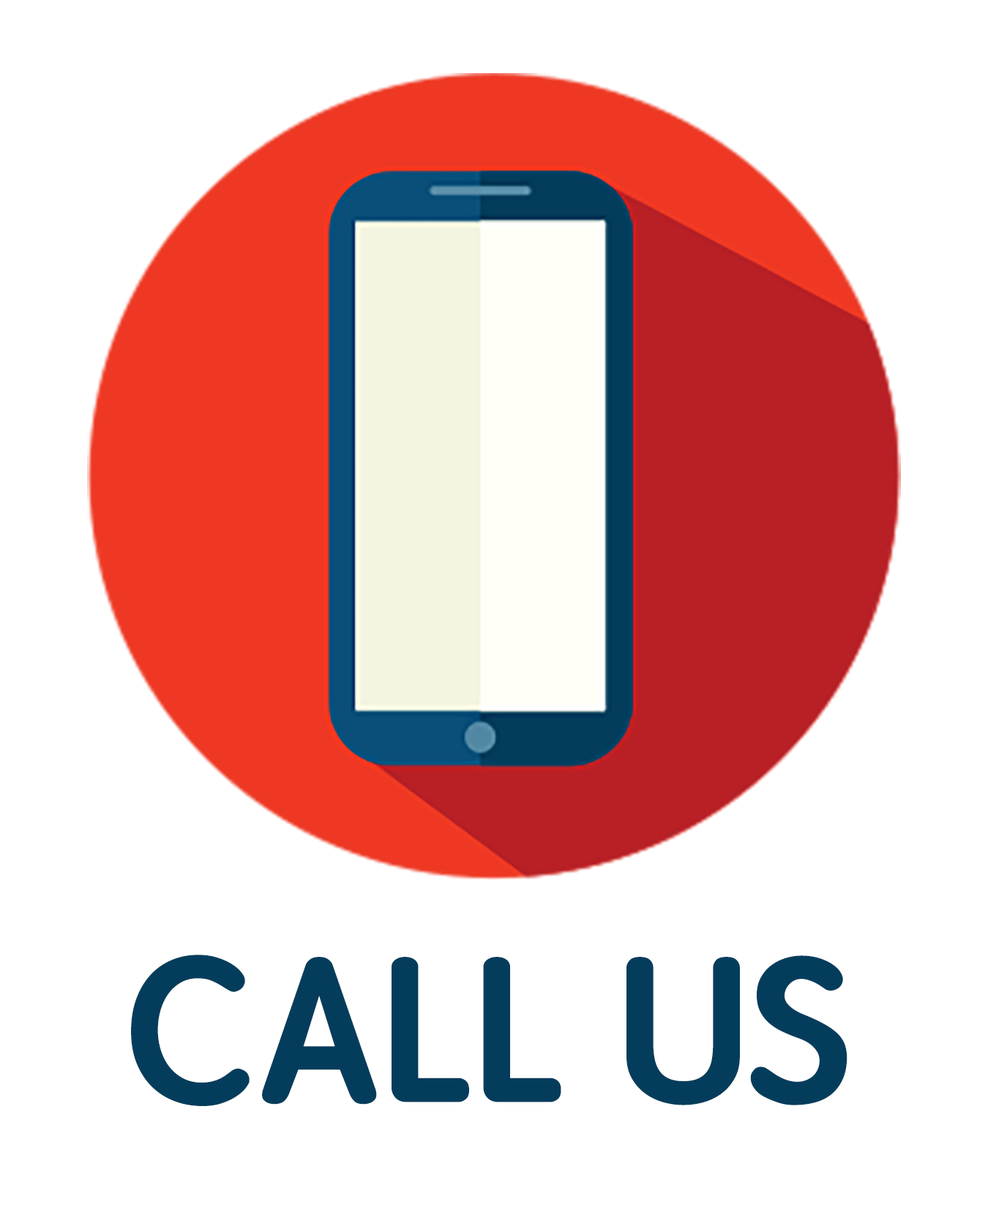
<style>
.page{position:relative;width:988px;height:1207px;background:#ffffff}
.page>*{position:absolute;margin:0}
.t1{font:205px "STYuanti-SC-Bold";color:#043d5c}
</style>
<div class="page">
<p class="t1" style="left:131px;top:955px;width:716px;height:151px">CALL US</p>
</div>
